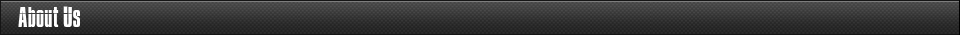
<style>
.page{position:relative;width:960px;height:35px}
.page>*{position:absolute;margin:0}
.t1{font:25px "Impossible";color:#ffffff}
</style>
<div class="page">
<p class="t1" style="left:18px;top:6px;width:62px;height:21px">About Us</p>
</div>
